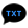
<style>
.page{position:relative;width:28px;height:28px;background:#ffffff}
.page>*{position:absolute;margin:0}
.t1{font:7px "Helvetica-Bold";letter-spacing:0.1em;color:#3394ff}
</style>
<div class="page">
<p class="t1" style="left:6px;top:10px;width:16px;height:7px">TXT</p>
</div>
